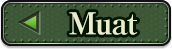
<style>
.page{position:relative;width:172px;height:49px}
.page>*{position:absolute;margin:0}
.t1{font:30px "RyuminPro-ExBold";letter-spacing:-0.04em;color:#eaedc8}
</style>
<div class="page">
<p class="t1" style="left:69px;top:12px;width:69px;height:23px">Muat</p>
</div>
